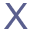
<style>
.page{position:relative;width:32px;height:32px;background:#ffffff}
.page>*{position:absolute;margin:0}
.t1{font:36px "ArialMT";color:#5a5f8e}
</style>
<div class="page">
<p class="t1" style="left:4px;top:3px;width:24px;height:26px">X</p>
</div>
